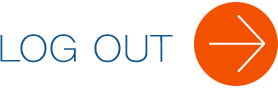
<style>
.page{position:relative;width:278px;height:89px;background:#ffffff}
.page>*{position:absolute;margin:0}
.t1{font:38px "YDIYGO310";letter-spacing:0.016em;color:#0e558b;scale:1.1 1}
</style>
<div class="page">
<p class="t1" style="left:0px;top:34px;width:173px;height:29px">LOG OUT</p>
</div>
